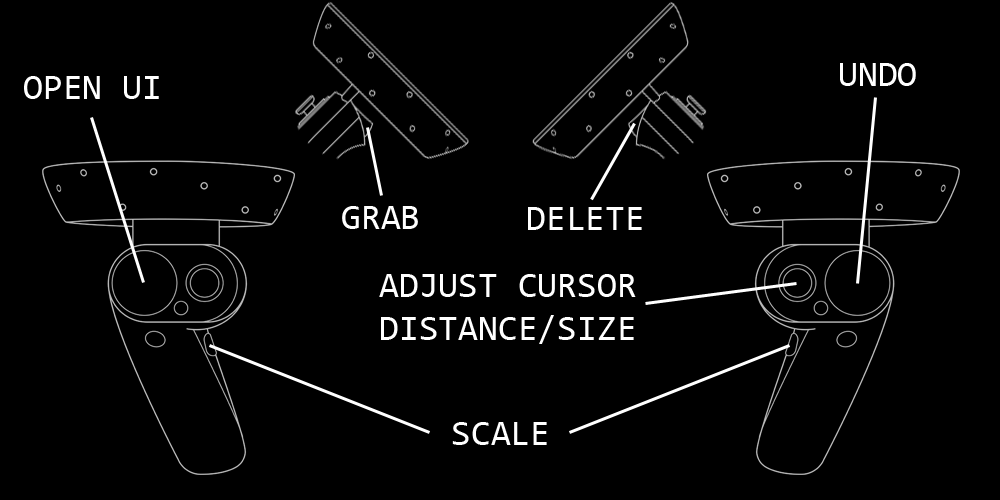
<style>
.page{position:relative;width:1000px;height:500px;background:#000000}
.page>*{position:absolute;margin:0}
.t1{font:36px "Consolas";color:#ffffff}
</style>
<div class="page">
<p class="t1" style="left:840px;top:63px;width:76px;height:23px">UNDO</p>
<p class="t1" style="left:24px;top:76px;width:135px;height:23px">OPEN UI</p>
<p class="t1" style="left:342px;top:206px;width:76px;height:23px">GRAB</p>
<p class="t1" style="left:528px;top:207px;width:114px;height:23px">DELETE</p>
<p class="t1" style="left:379px;top:274px;width:257px;height:70px">ADJUST CURSOR<br>DISTANCE/SIZE</p>
<p class="t1" style="left:452px;top:422px;width:95px;height:23px">SCALE</p>
</div>
